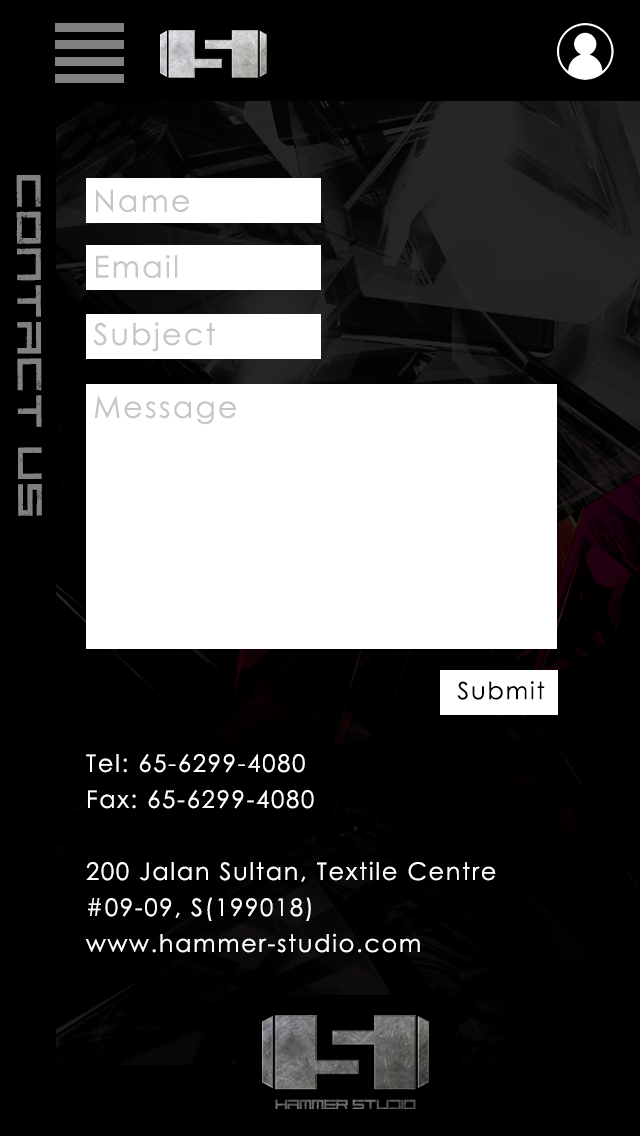
<style>
.page{position:relative;width:640px;height:1136px;background:#000000}
.page>*{position:absolute;margin:0}
.t1{font:42px "CodePredators-Regular";letter-spacing:0.075em;color:#818181;scale:1.13 1}
.t2{font:30px "CenturyGothic";letter-spacing:0.075em;color:#c6c6c6}
.t3{font:24px "CenturyGothic";letter-spacing:0.075em;color:#000000}
.t4{font:24px/36px "CenturyGothic";letter-spacing:0.075em;color:#ffffff}
</style>
<div class="page">
<p class="t1" style="left:16px;top:175px;width:26px;height:341px;rotate:90deg">contact us</p>
<p class="t2" style="left:96px;top:189px;width:93px;height:23px">Name</p>
<p class="t2" style="left:96px;top:255px;width:82px;height:23px">Email</p>
<p class="t2" style="left:93px;top:322px;width:122px;height:30px">Subject</p>
<p class="t2" style="left:95px;top:396px;width:141px;height:29px">Message</p>
<p class="t3" style="left:457px;top:681px;width:88px;height:19px">Submit</p>
<p class="t4" style="left:86px;top:754px;width:410px;height:199px;text-align:right">Tel: 65-6299-4080<br>Fax: 65-6299-4080<br><br>200 Jalan Sultan, Textile Centre<br>#09-09, S(199018)<br>www.hammer-studio.com</p>
</div>
